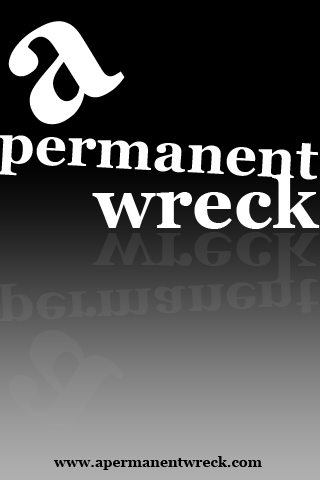
<style>
.page{position:relative;width:320px;height:480px;background:#000000}
.page>*{position:absolute;margin:0}
.t1{font:180px "Georgia-Bold";color:#ffffff;scale:0.97 1}
.t2{font:72px "Georgia-Bold";color:#ffffff}
.t3{font:14px "Georgia-Bold";color:#000000}
</style>
<div class="page">
<p class="t1" style="left:8px;top:21px;width:117px;height:104px;rotate:-33deg">a</p>
<p class="t2" style="left:92px;top:174px;width:228px;height:55px">wreck</p>
<p class="t3" style="left:53px;top:456px;width:209px;height:14px">www.apermanentwreck.com</p>
</div>
